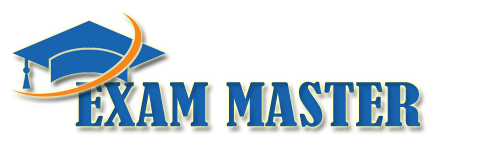
<style>
.page{position:relative;width:500px;height:150px;background:#ffffff}
.page>*{position:absolute;margin:0}
.t1{font:55.7px "BernardMT-Condensed";color:#1864b0;scale:1.22 1}
</style>
<div class="page">
<p class="t1" style="left:75px;top:81px;width:345px;height:46px">EXAM MASTER</p>
</div>
